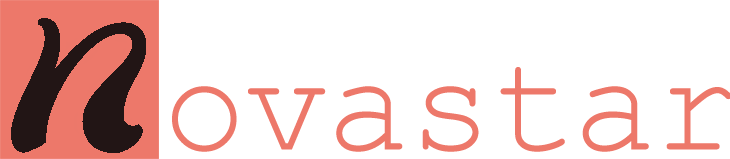
<style>
.page{position:relative;width:730px;height:159px;background:#ffffff}
.page>*{position:absolute;margin:0}
.t1{font:144px "CourierNewPSMT";letter-spacing:-0.012em;color:#ed786a;scale:0.97 1}
</style>
<div class="page">
<p class="t1" style="left:172px;top:67px;width:560px;height:85px">ovastar</p>
</div>
